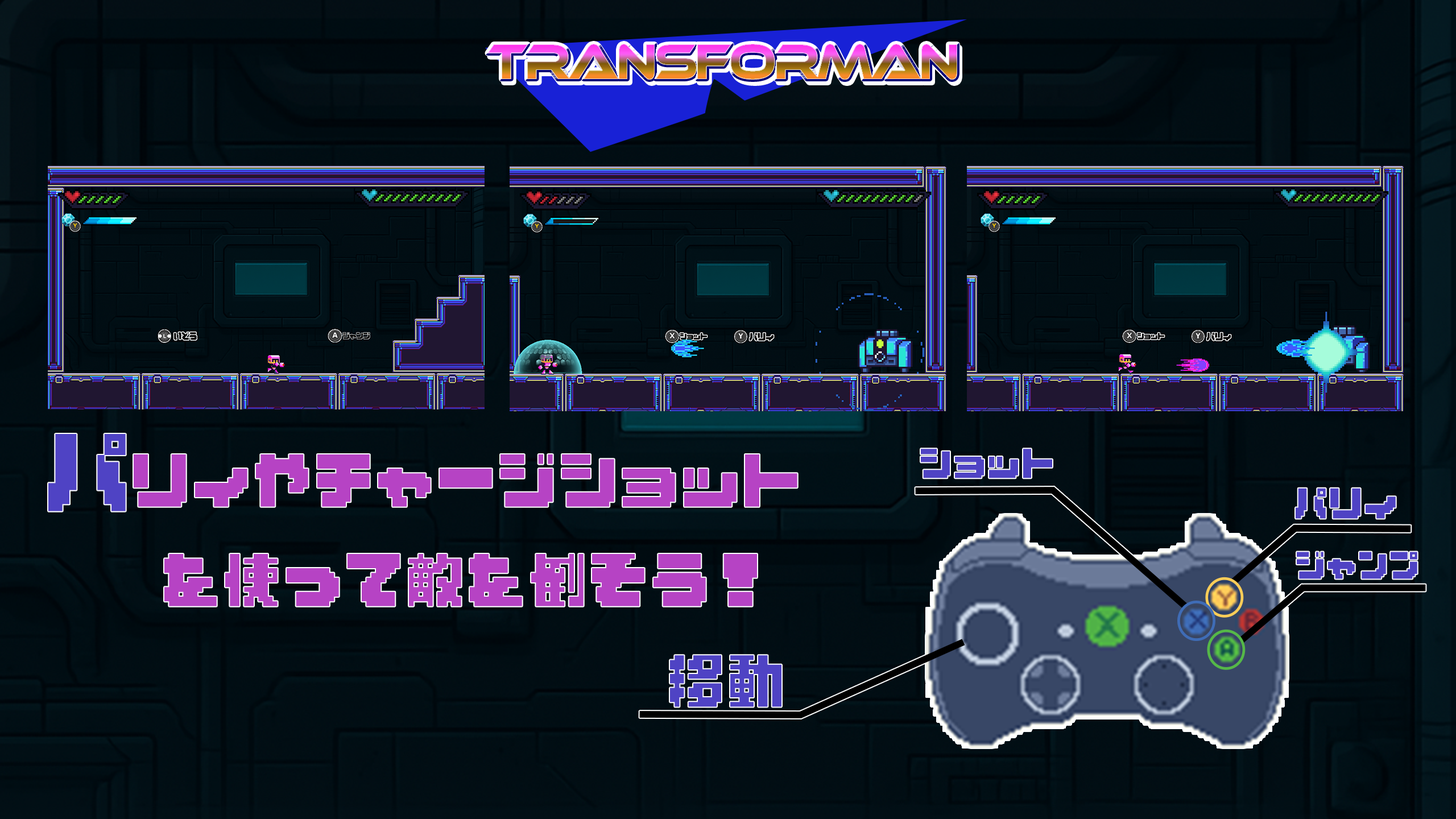
<style>
.page{position:relative;width:1456px;height:819px}
.page>*{position:absolute;margin:0}
.t1{font:84.2px "Melonano";letter-spacing:0.075em;color:#4f43c4}
.t2{font:31.7px "Melonano";letter-spacing:0.075em;color:#4f43c4}
.t3{font:56.9px "Melonano";letter-spacing:0.075em;color:#b643c4}
.t4{font:32.7px "Melonano";letter-spacing:0.075em;color:#4f43c4}
.t5{font:29.1px "Melonano";letter-spacing:0.075em;color:#4f43c4}
.t6{font:55.8px "Melonano";letter-spacing:0.075em;color:#4f43c4}
</style>
<div class="page">
<p class="t1" style="left:48px;top:434px;width:78px;height:77px">パ</p>
<p class="t2" style="left:921px;top:449px;width:131px;height:29px">ショット</p>
<p class="t3" style="left:134px;top:454px;width:663px;height:152px;text-align:center">リィやチャージショット<br>を使って敵を倒そう！</p>
<p class="t4" style="left:1296px;top:488px;width:100px;height:31px">パリィ</p>
<p class="t5" style="left:1297px;top:552px;width:120px;height:27px">ジャンプ</p>
<p class="t6" style="left:670px;top:655px;width:111px;height:52px">移動</p>
</div>
